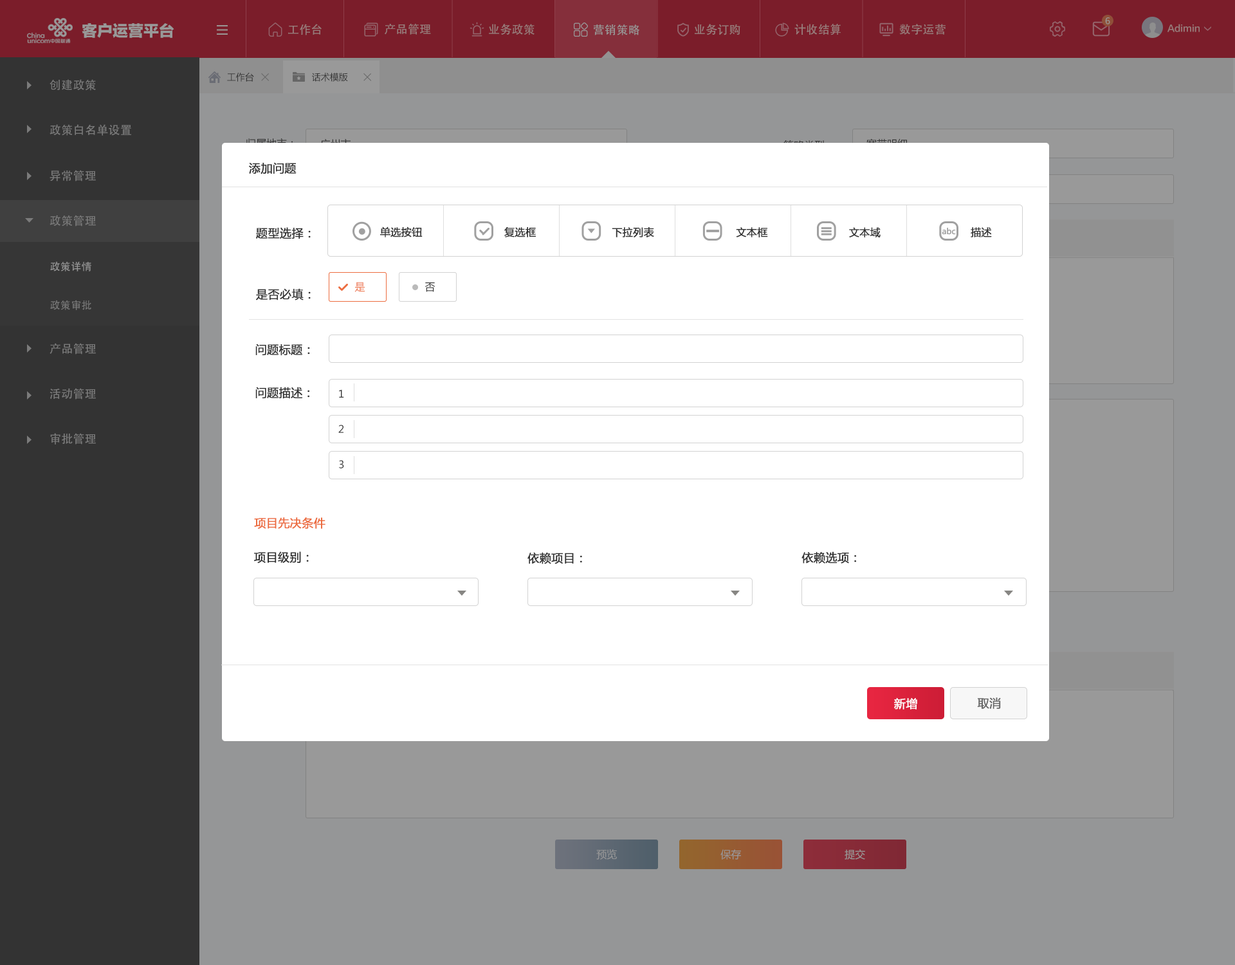
<style>
.page{position:relative;width:1235px;height:965px;background:#ffffff}
.page>*{position:absolute;margin:0}
.t1{font:9px "SourceHanSansCN-Medium";letter-spacing:0.02em;color:#999999}
.t2{font:15.4px "FZLTTHK--GBK1-0";color:#999999}
.t3{font:11.6px "AdobeHeitiStd-Regular";letter-spacing:0.02em;color:#997c7c}
.t4{font:11.6px "AdobeHeitiStd-Regular";letter-spacing:0.02em;color:#999999}
.t5{font:9px "FZLTZHK--GBK1-0";color:#997c7c}
.t6{font:9px "MicrosoftYaHei";color:#333333}
.t7{font:11.6px "AdobeHeitiStd-Regular";letter-spacing:0.02em;color:#7b7b7b}
.t8{font:11.6px "MicrosoftYaHei";color:#333333;font-weight:bold}
.t9{font:10.3px "MicrosoftYaHei";color:#333333;font-weight:bold}
.t10{font:7.9px "MicrosoftYaHei";color:#a0a0a0;font-weight:bold}
.t11{font:10.3px/38.6px "AdobeHeitiStd-Regular";letter-spacing:0.02em}
.t12{font:10.3px "MicrosoftYaHei";color:#ec6c3f}
.t13{font:10.3px "MicrosoftYaHei";color:#333333}
.t14{font:11.6px "MicrosoftYaHei";color:#ec6c3f;font-weight:bold}
.t15{font:11.6px "MicrosoftYaHei";color:#ffffff;font-weight:bold}
.t16{font:11.6px "MicrosoftYaHei";color:#666666;font-weight:bold}
.t17{font:10.3px "MicrosoftYaHei";color:#999999}
</style>
<div class="page">
<p class="t1" style="left:1105px;top:17px;width:6px;height:7px">6</p>
<p class="t2" style="left:82px;top:23px;width:92px;height:15px">客户运营平台</p>
<p class="t3" style="left:288px;top:24px;width:34px;height:11px">工作台</p>
<p class="t3" style="left:385px;top:23px;width:46px;height:12px">产品管理</p>
<p class="t3" style="left:489px;top:24px;width:46px;height:11px">业务政策</p>
<p class="t4" style="left:593px;top:24px;width:47px;height:11px">营销策略</p>
<p class="t3" style="left:695px;top:24px;width:46px;height:11px">业务订购</p>
<p class="t3" style="left:795px;top:24px;width:46px;height:11px">计收结算</p>
<p class="t3" style="left:900px;top:24px;width:46px;height:11px">数字运营</p>
<p class="t5" style="left:1168px;top:24px;width:32px;height:8px">Adimin</p>
<p class="t6" style="left:227px;top:72px;width:27px;height:10px">工作台</p>
<p class="t6" style="left:312px;top:73px;width:36px;height:9px">话术模版</p>
<p class="t7" style="left:50px;top:79px;width:46px;height:12px">创建政策</p>
<p class="t7" style="left:50px;top:124px;width:81px;height:12px">政策白名单设置</p>
<p class="t7" style="left:50px;top:170px;width:46px;height:11px">异常管理</p>
<p class="t8" style="left:249px;top:162px;width:48px;height:12px">添加问题</p>
<p class="t7" style="left:50px;top:215px;width:46px;height:11px">政策管理</p>
<p class="t8" style="left:256px;top:227px;width:55px;height:12px">题型选择：</p>
<p class="t9" style="left:380px;top:226px;width:43px;height:11px">单选按钮</p>
<p class="t9" style="left:504px;top:227px;width:32px;height:10px">复选框</p>
<p class="t9" style="left:612px;top:227px;width:42px;height:10px">下拉列表</p>
<p class="t9" style="left:736px;top:227px;width:32px;height:10px">文本框</p>
<p class="t9" style="left:849px;top:227px;width:32px;height:10px">文本域</p>
<p class="t10" style="left:942px;top:228px;width:14px;height:7px">abc</p>
<p class="t9" style="left:971px;top:227px;width:21px;height:10px">描述</p>
<p class="t11" style="left:50px;top:261px;width:41px;height:49px">政策详情<br>政策审批</p>
<p class="t12" style="left:355px;top:282px;width:10px;height:10px">是</p>
<p class="t8" style="left:256px;top:288px;width:55px;height:12px">是否必填：</p>
<p class="t13" style="left:425px;top:282px;width:11px;height:10px">否</p>
<p class="t7" style="left:50px;top:343px;width:46px;height:12px">产品管理</p>
<p class="t8" style="left:255px;top:344px;width:55px;height:12px">问题标题：</p>
<p class="t7" style="left:50px;top:388px;width:46px;height:12px">活动管理</p>
<p class="t8" style="left:255px;top:387px;width:55px;height:12px">问题描述：</p>
<p class="t13" style="left:339px;top:389px;width:5px;height:9px">1</p>
<p class="t13" style="left:338px;top:425px;width:6px;height:8px">2</p>
<p class="t7" style="left:50px;top:433px;width:46px;height:12px">审批管理</p>
<p class="t13" style="left:339px;top:460px;width:5px;height:8px">3</p>
<p class="t14" style="left:254px;top:517px;width:72px;height:12px">项目先决条件</p>
<p class="t8" style="left:254px;top:551px;width:55px;height:13px">项目级别：</p>
<p class="t8" style="left:528px;top:552px;width:54px;height:12px">依赖项目：</p>
<p class="t8" style="left:802px;top:551px;width:54px;height:13px">依赖选项：</p>
<p class="t15" style="left:894px;top:698px;width:24px;height:12px">新增</p>
<p class="t16" style="left:977px;top:698px;width:24px;height:11px">取消</p>
<p class="t17" style="left:596px;top:849px;width:21px;height:11px">预览</p>
<p class="t17" style="left:721px;top:849px;width:20px;height:11px">保存</p>
<p class="t17" style="left:845px;top:849px;width:20px;height:11px">提交</p>
</div>
